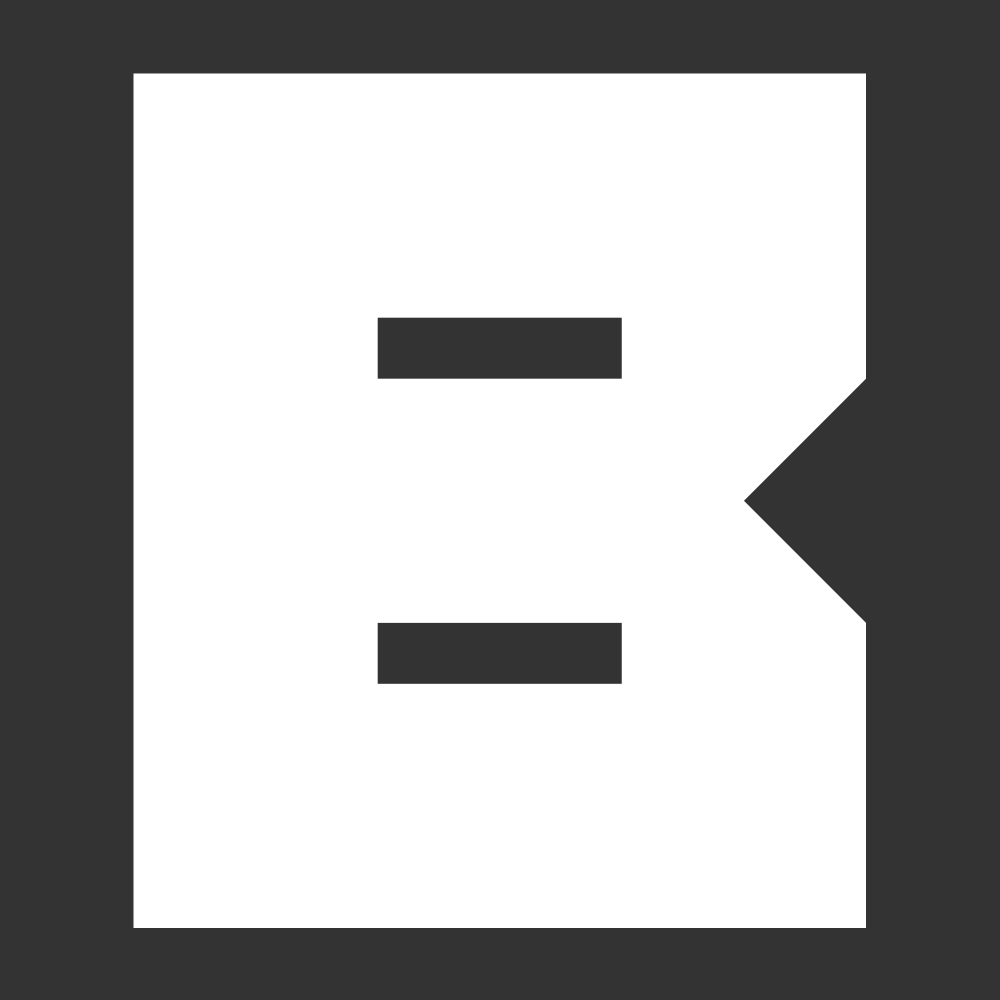
<style>
.page{position:relative;width:1000px;height:1000px;background:#ffffff}
.page>*{position:absolute;margin:0}
.t1{font:1250px "NeonOverdrive";letter-spacing:0.01em;color:#ffffff}
</style>
<div class="page">
<p class="t1" style="left:133px;top:73px;width:733px;height:855px">B</p>
</div>
